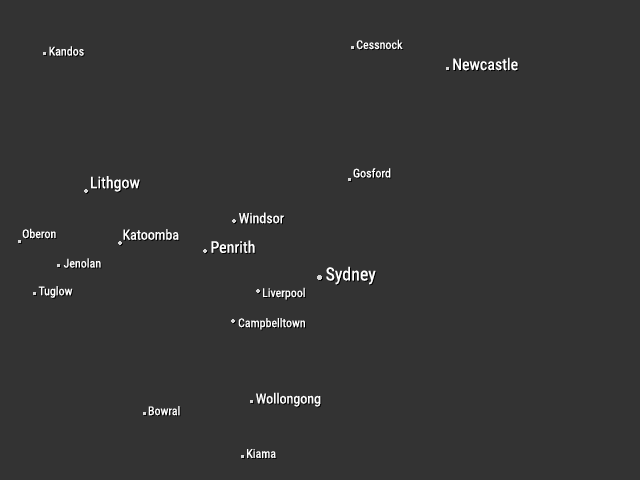
<style>
.page{position:relative;width:640px;height:480px;background:#333333}
.page>*{position:absolute;margin:0}
.t1{font:12px "RobotoCondensed-Regular";color:#ffffff}
.t2{font:16px "RobotoCondensed-Regular";color:#ffffff}
.t3{font:14px "RobotoCondensed-Regular";color:#ffffff}
.t4{font:18px "RobotoCondensed-Regular";color:#ffffff}
</style>
<div class="page">
<p class="t1" style="left:356px;top:39px;width:47px;height:11px">Cessnock</p>
<p class="t1" style="left:49px;top:46px;width:35px;height:10px">Kandos</p>
<p class="t2" style="left:453px;top:57px;width:65px;height:14px">Newcastle</p>
<p class="t1" style="left:353px;top:168px;width:38px;height:10px">Gosford</p>
<p class="t2" style="left:91px;top:176px;width:49px;height:16px">Lithgow</p>
<p class="t3" style="left:239px;top:212px;width:45px;height:12px">Windsor</p>
<p class="t1" style="left:22px;top:228px;width:34px;height:11px">Oberon</p>
<p class="t3" style="left:123px;top:229px;width:56px;height:11px">Katoomba</p>
<p class="t2" style="left:211px;top:240px;width:44px;height:13px">Penrith</p>
<p class="t1" style="left:63px;top:258px;width:38px;height:10px">Jenolan</p>
<p class="t4" style="left:326px;top:266px;width:50px;height:19px">Sydney</p>
<p class="t1" style="left:38px;top:286px;width:35px;height:12px">Tuglow</p>
<p class="t1" style="left:263px;top:287px;width:42px;height:13px">Liverpool</p>
<p class="t1" style="left:238px;top:318px;width:67px;height:12px">Campbelltown</p>
<p class="t3" style="left:256px;top:392px;width:65px;height:15px">Wollongong</p>
<p class="t1" style="left:148px;top:406px;width:32px;height:10px">Bowral</p>
<p class="t1" style="left:247px;top:449px;width:29px;height:9px">Kiama</p>
</div>
